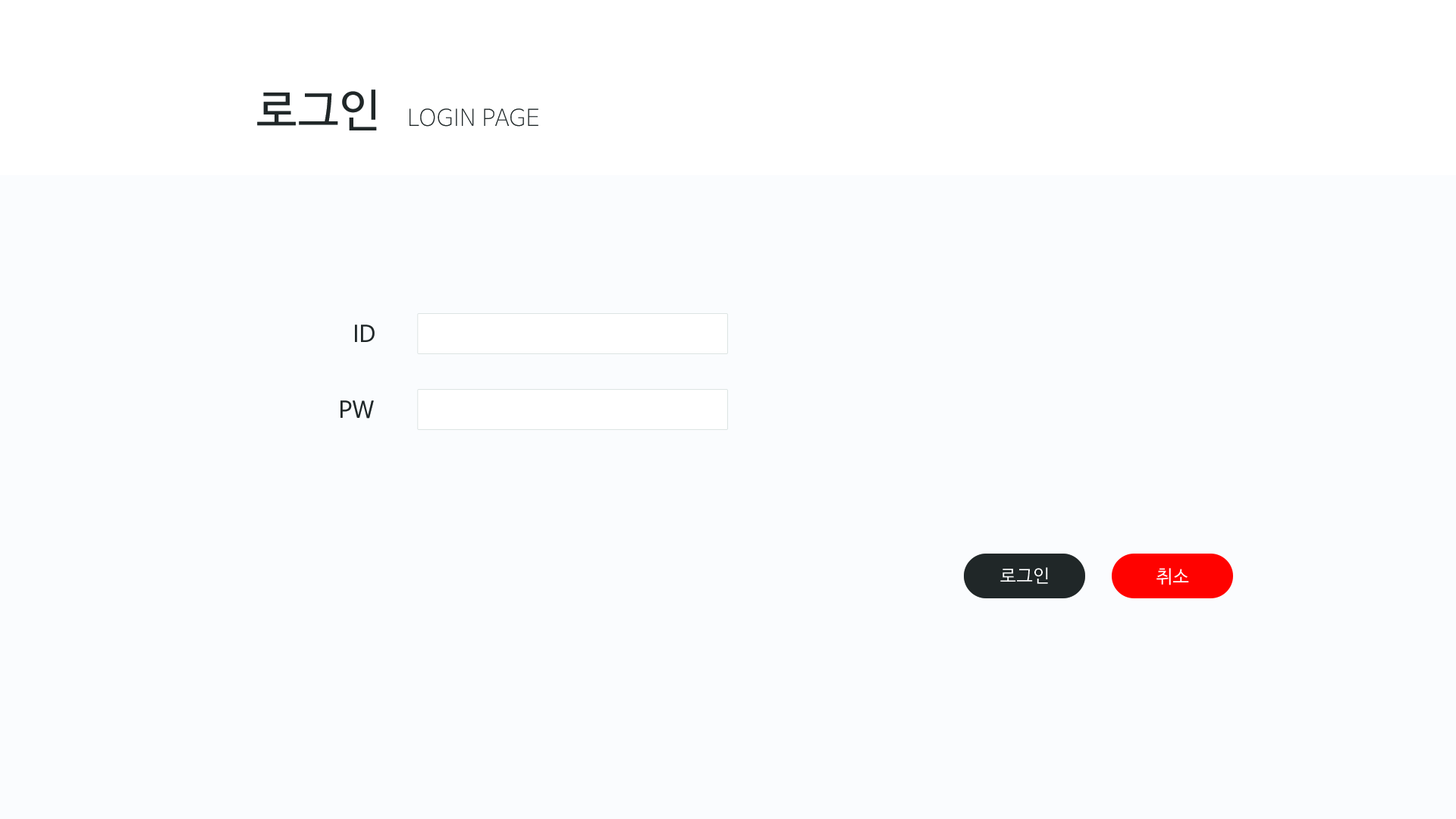
<style>
.page{position:relative;width:1456px;height:819px;background:#fafcfe}
.page>*{position:absolute;margin:0}
.t1{font:45.5px "NanumBarunGothic";letter-spacing:0.025em;color:#202728}
.t2{font:22.7px "NanumBarunGothicUltraLight";letter-spacing:0.025em;color:#202728}
.t3{font:22.7px "NanumBarunGothic";letter-spacing:0.025em;color:#202728}
.t4{font:18.2px "NanumBarunGothic";letter-spacing:0.025em;color:#ffffff}
</style>
<div class="page">
<p class="t1" style="left:257px;top:89px;width:120px;height:41px">로그인</p>
<p class="t2" style="left:409px;top:108px;width:129px;height:19px">LOGIN PAGE</p>
<p class="t3" style="left:355px;top:325px;width:20px;height:17px">ID</p>
<p class="t3" style="left:340px;top:400px;width:34px;height:19px">PW</p>
<p class="t4" style="left:1000px;top:567px;width:48px;height:17px">로그인</p>
<p class="t4" style="left:1156px;top:568px;width:33px;height:17px">취소</p>
</div>
